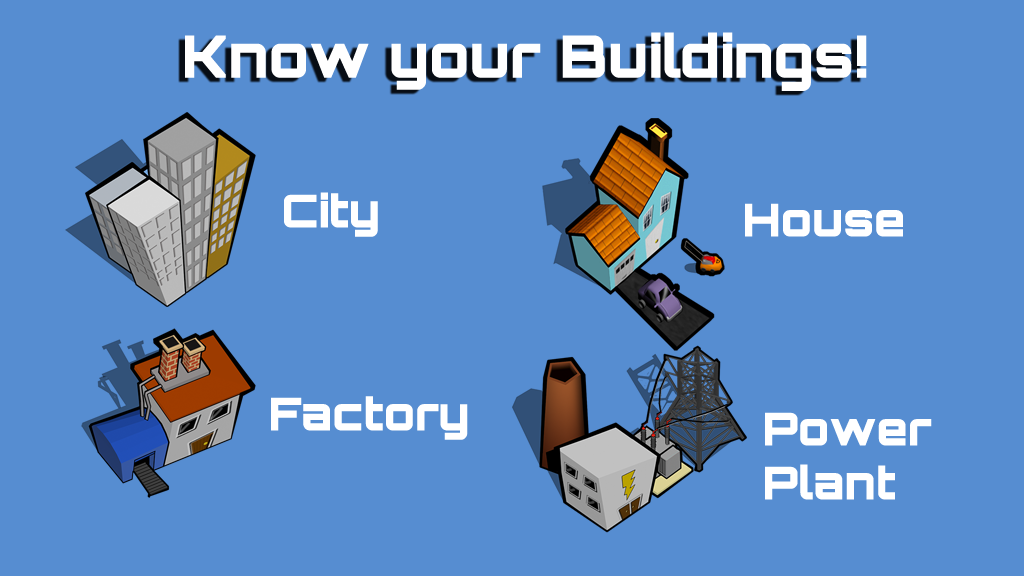
<style>
.page{position:relative;width:1024px;height:576px;background:#568dd1}
.page>*{position:absolute;margin:0}
.t1{font:58.3px "Orbitron-Black";color:#ffffff}
.t2{font:45px "Orbitron-Black";color:#ffffff}
</style>
<div class="page">
<p class="t1" style="left:185px;top:32px;width:682px;height:59px">Know your Buildings!</p>
<p class="t2" style="left:284px;top:192px;width:94px;height:45px">City</p>
<p class="t2" style="left:745px;top:203px;width:158px;height:34px">House</p>
<p class="t2" style="left:271px;top:396px;width:197px;height:44px">Factory</p>
<p class="t2" style="left:765px;top:412px;width:167px;height:88px">Power<br>Plant</p>
</div>
